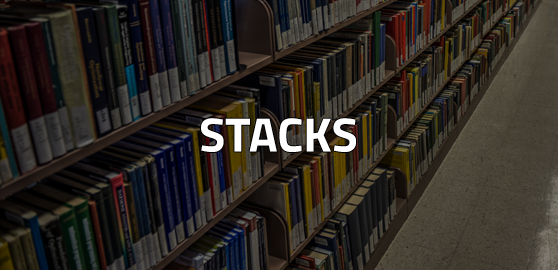
<style>
.page{position:relative;width:558px;height:270px}
.page>*{position:absolute;margin:0}
.t1{font:48px "TitilliumWeb-Bold";color:#ffffff}
</style>
<div class="page">
<p class="t1" style="left:201px;top:118px;width:155px;height:34px">STACKS</p>
</div>
